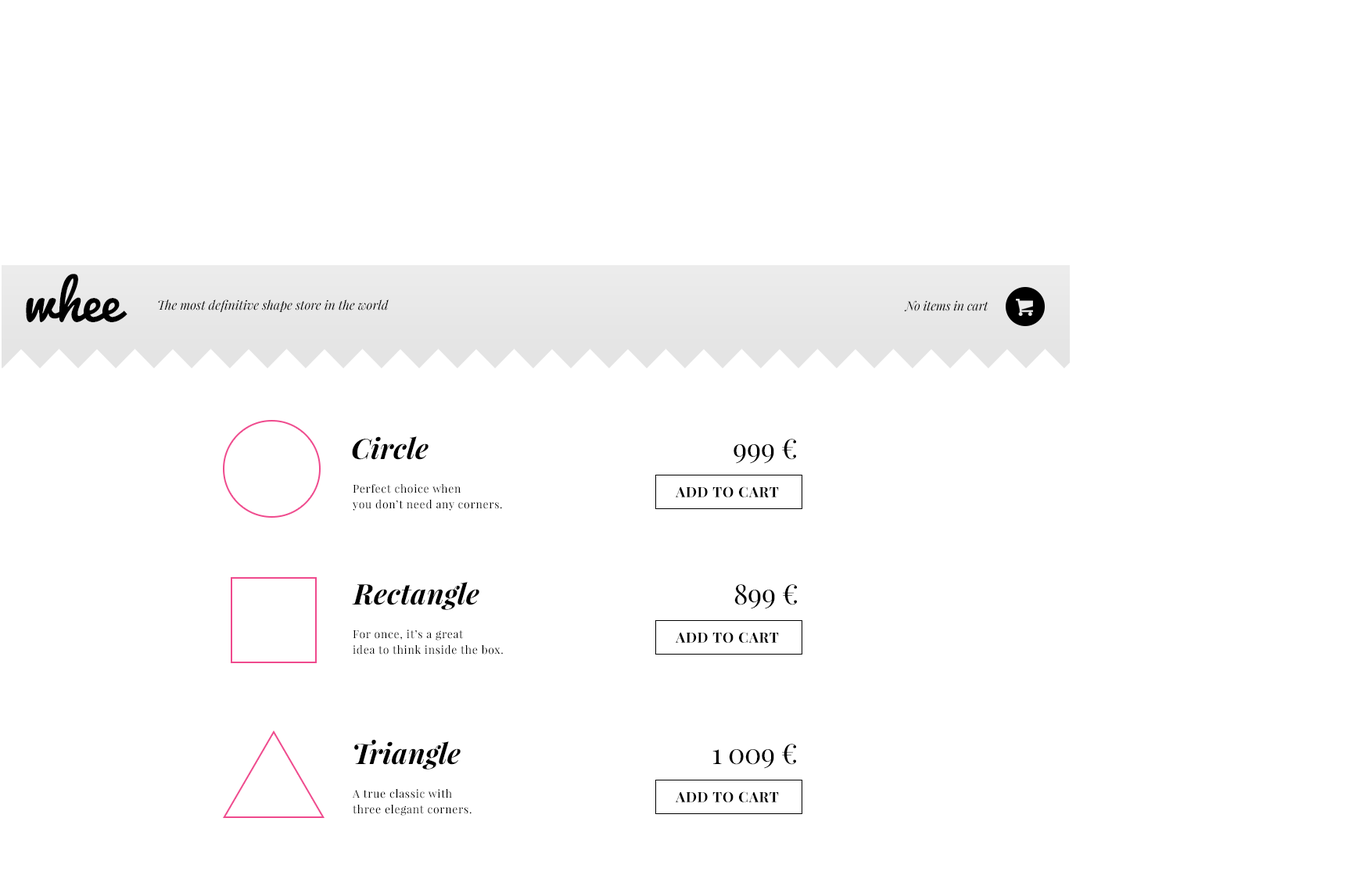
<style>
.page{position:relative;width:1356px;height:879px;background:#ffffff}
.page>*{position:absolute;margin:0}
.t1{font:51.7px "Pacifico-Regular";letter-spacing:-0.015em;color:#000000}
.t2{font:12.5px "PlayfairDisplay-Italic";color:#000000}
.t3{font:12.5px "PlayfairDisplay-Italic";letter-spacing:-0.015em;color:#000000}
.t4{font:28.2px "PlayfairDisplay-BoldItalic";letter-spacing:0.01em;color:#000000}
.t5{font:28.2px "PlayfairDisplay-Regular";letter-spacing:-0.015em;color:#000000}
.t6{font:11px/15.6px "PlayfairDisplay-Regular";letter-spacing:0.05em;color:#000000}
.t7{font:14.1px "PlayfairDisplay-Bold";letter-spacing:0.05em;color:#000000}
</style>
<div class="page">
<p class="t1" style="left:26px;top:274px;width:101px;height:48px">whee</p>
<p class="t2" style="left:158px;top:300px;width:231px;height:13px">The most definitive shape store in the world</p>
<p class="t3" style="left:904px;top:300px;width:85px;height:11px">No items in cart</p>
<p class="t4" style="left:352px;top:436px;width:77px;height:24px">Circle</p>
<p class="t5" style="left:734px;top:439px;width:62px;height:25px">999 €</p>
<p class="t6" style="left:353px;top:483px;width:149px;height:28px">Perfect choice when<br>you don’t need any corners.</p>
<p class="t7" style="left:676px;top:487px;width:103px;height:10px">ADD TO CART</p>
<p class="t4" style="left:352px;top:582px;width:127px;height:28px">Rectangle</p>
<p class="t5" style="left:734px;top:584px;width:63px;height:25px">899 €</p>
<p class="t6" style="left:353px;top:630px;width:150px;height:25px">For once, it’s a great <br>idea to think inside the box.</p>
<p class="t7" style="left:676px;top:632px;width:103px;height:11px">ADD TO CART</p>
<p class="t4" style="left:354px;top:739px;width:107px;height:31px">Triangle</p>
<p class="t5" style="left:713px;top:744px;width:83px;height:25px">1 009 €</p>
<p class="t6" style="left:353px;top:788px;width:119px;height:28px">A true classic with<br>three elegant corners.</p>
<p class="t7" style="left:676px;top:792px;width:103px;height:11px">ADD TO CART</p>
</div>
